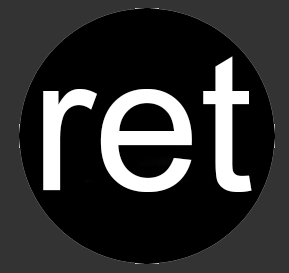
<style>
.page{position:relative;width:289px;height:273px;background:#000000}
.page>*{position:absolute;margin:0}
.t1{font:190px "ArialMT";color:#ffffff}
</style>
<div class="page">
<p class="t1" style="left:43px;top:56px;width:209px;height:136px">ret</p>
</div>
